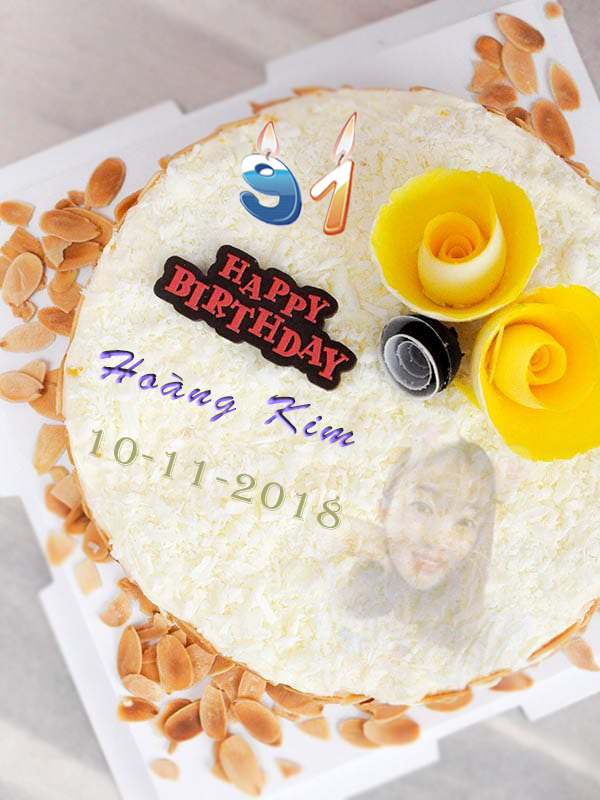
<style>
.page{position:relative;width:600px;height:800px}
.page>*{position:absolute;margin:0}
.t1{font:48px "BrushScriptStd";letter-spacing:0.1em}
.t2{font:27.5px "VNI-AlgerianU";letter-spacing:0.1em;color:#a7a86b;scale:1.09 1}
</style>
<div class="page">
<p class="t1" style="left:99px;top:350px;width:256px;height:97px;rotate:16deg">Hoàng Kim</p>
<p class="t2" style="left:88px;top:429px;width:254px;height:101px;rotate:17deg">10-11-2018</p>
</div>
